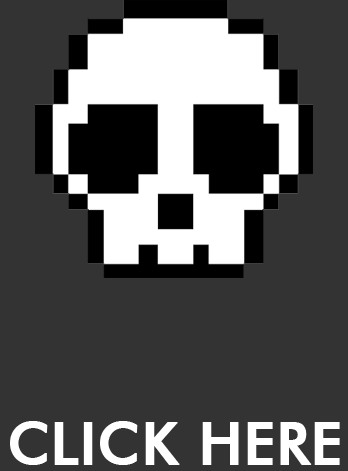
<style>
.page{position:relative;width:348px;height:471px;background:#333333}
.page>*{position:absolute;margin:0}
.t1{font:58.3px "FuturaBT-Medium";color:#ffffff;text-transform:uppercase;font-weight:bold}
</style>
<div class="page">
<p class="t1" style="left:10px;top:421px;width:330px;height:44px">click here</p>
</div>
